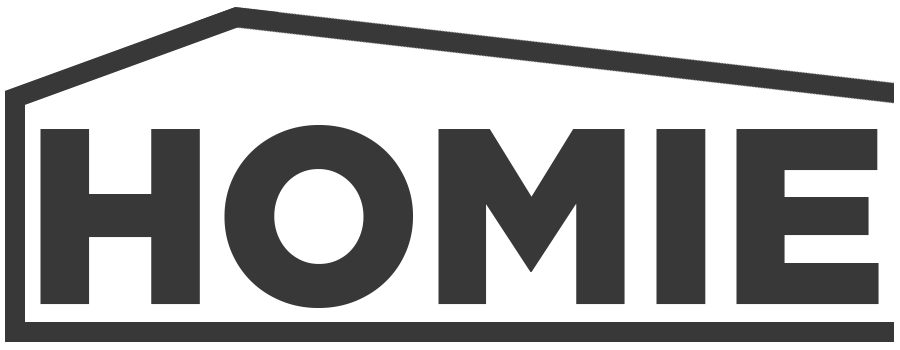
<style>
.page{position:relative;width:900px;height:350px;background:#ffffff}
.page>*{position:absolute;margin:0}
.t1{font:250px "GothamHTF-Black";color:#383838}
</style>
<div class="page">
<p class="t1" style="left:40px;top:125px;width:839px;height:183px">HOMIE</p>
</div>
